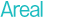
<style>
.page{position:relative;width:84px;height:21px;background:#ffffff}
.page>*{position:absolute;margin:0}
.t1{font:20px "GothicMB101Pro-Regular";letter-spacing:-0.06em;color:#1dbcc0;scale:0.9 1}
</style>
<div class="page">
<p class="t1" style="left:0px;top:1px;width:43px;height:16px">Areal</p>
</div>
